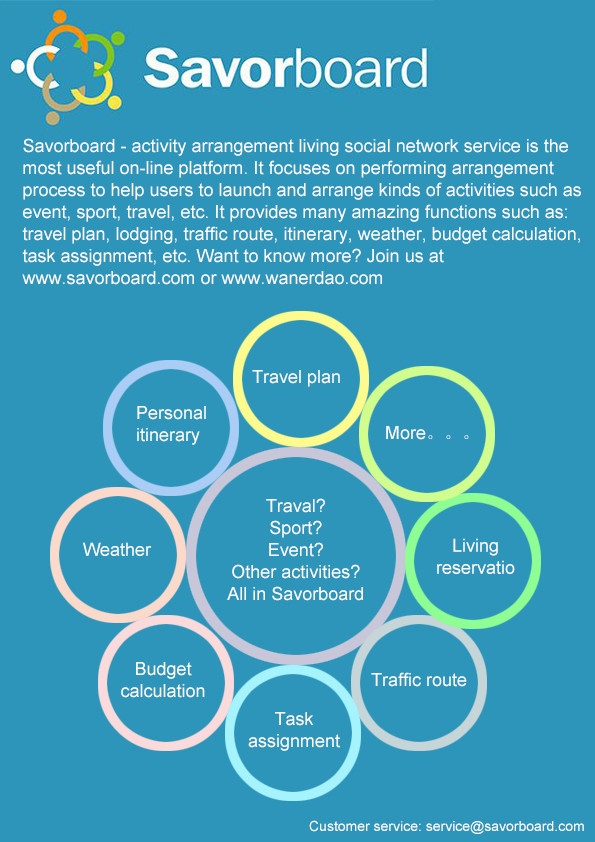
<style>
.page{position:relative;width:595px;height:842px;background:#2d95ba}
.page>*{position:absolute;margin:0}
.t1{font:18px/22px "ArialMT";color:#ffffff}
.t2{font:18px "ArialMT";color:#ffffff}
.t3{font:18px "SimSun";color:#ffffff}
.t4{font:14px "ArialMT";color:#ffffff}
</style>
<div class="page">
<p class="t1" style="left:22px;top:138px;width:559px;height:147px">Savorboard - activity arrangement living social network service is the most useful on-line platform. It focuses on performing arrangement process to help users to launch and arrange kinds of activities such as event, sport, travel, etc. It provides many amazing functions such as: travel plan, lodging, traffic route, itinerary, weather, budget calculation, task assignment, etc. Want to know more? Join us at www.savorboard.com or www.wanerdao.com</p>
<p class="t2" style="left:252px;top:370px;width:88px;height:17px">Travel plan</p>
<p class="t1" style="left:137px;top:406px;width:69px;height:39px">Personal itinerary</p>
<p class="t2" style="left:386px;top:426px;width:83px;height:14px">More<span class="t3">。。。</span></p>
<p class="t1" style="left:227px;top:498px;width:136px;height:103px;text-align:center">Traval? <br>Sport? <br>Event? <br>Other activities?<br>All in Savorboard</p>
<p class="t2" style="left:83px;top:542px;width:69px;height:14px">Weather</p>
<p class="t1" style="left:437px;top:538px;width:78px;height:36px;text-align:center">Living reservation</p>
<p class="t1" style="left:121px;top:662px;width:84px;height:36px;text-align:center">Budget calculation</p>
<p class="t2" style="left:371px;top:672px;width:96px;height:15px">Traffic route</p>
<p class="t1" style="left:248px;top:712px;width:92px;height:39px;text-align:center">Task assignment</p>
<p class="t4" style="left:309px;top:820px;width:275px;height:14px">Customer service: service@savorboard.com</p>
</div>
